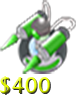
<style>
.page{position:relative;width:77px;height:95px;background:#ffffff}
.page>*{position:absolute;margin:0}
.t1{font:22px "LucidaConsole"}
</style>
<div class="page">
<p class="t1" style="left:0px;top:76px;width:50px;height:18px">$400</p>
</div>
